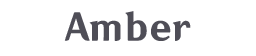
<style>
.page{position:relative;width:256px;height:56px;background:#ffffff}
.page>*{position:absolute;margin:0}
.t1{font:36px "HYWenHei-HEW";color:#4f4e57}
</style>
<div class="page">
<p class="t1" style="left:64px;top:11px;width:127px;height:30px">Amber</p>
</div>
